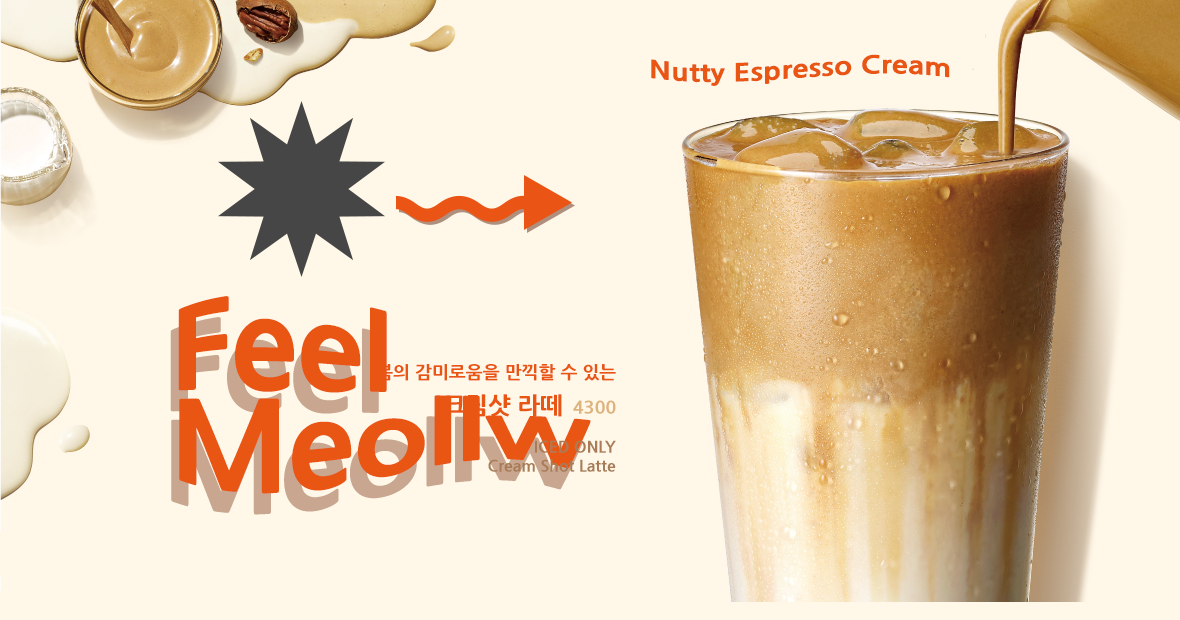
<style>
.page{position:relative;width:1180px;height:620px;background:#fff8e8}
.page>*{position:absolute;margin:0}
.t1{font:24px "NanumGothicExtraBold";color:#e95613;scale:1.25 1}
.t2{font:100px/85px "NanumGothicExtraBold";color:#e95613;scale:1.25 1}
.t3{font:18px "NanumGothicExtraBold";color:#e95613}
.t4{font:24px "NanumGothicExtraBold";color:#e95613}
.t5{font:18px "NanumGothicExtraBold";color:#ddb47e}
.t6{font:16px "NanumGothicExtraBold";color:#a87c56}
</style>
<div class="page">
<p class="t1" style="left:651px;top:54px;width:299px;height:32px">Nutty Espresso Cream</p>
<p class="t2" style="left:178px;top:296px;width:413px;height:198px">Feel<br>Meollw</p>
<p class="t3" style="left:376px;top:364px;width:240px;height:17px">봄의 감미로움을 만끽할 수 있는</p>
<p class="t4" style="left:443px;top:394px;width:173px;height:23px">크림샷 라떼  <span class="t5">4300</span></p>
<p class="t6" style="left:488px;top:440px;width:128px;height:32px;text-align:right">ICED ONLY<br>Cream Shot Latte</p>
</div>
